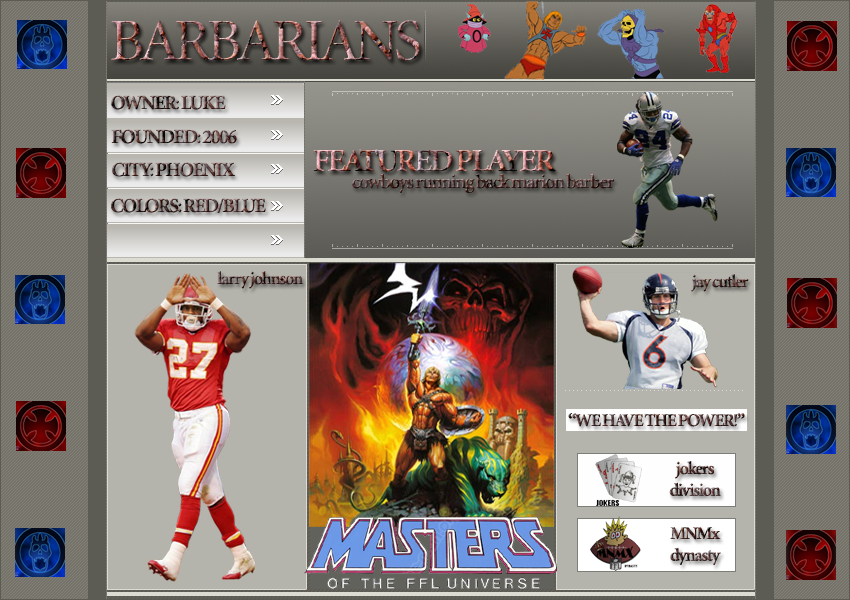
<style>
.page{position:relative;width:850px;height:600px}
.page>*{position:absolute;margin:0}
.t1{font:60px "Minion-Regular";letter-spacing:-0.075em}
.t2{font:20px "Minion-Bold";letter-spacing:-0.075em}
.t3{font:32px "Minion-Bold";letter-spacing:-0.075em}
.t4{font:18px "Minion-Bold";letter-spacing:-0.075em}
</style>
<div class="page">
<p class="t1" style="left:111px;top:20px;width:310px;height:41px">BARBARIANS</p>
<p class="t2" style="left:111px;top:95px;width:115px;height:15px">OWNER: LUKE</p>
<p class="t2" style="left:111px;top:129px;width:126px;height:15px">FOUNDED: 2006</p>
<p class="t3" style="left:313px;top:149px;width:243px;height:23px">FEATURED PLAYER</p>
<p class="t2" style="left:112px;top:162px;width:123px;height:15px">CITY: PHOENIX</p>
<p class="t2" style="left:352px;top:173px;width:263px;height:20px">cowboys running back marion barber</p>
<p class="t2" style="left:111px;top:198px;width:155px;height:15px">COLORS: RED/BLUE</p>
<p class="t4" style="left:217px;top:271px;width:86px;height:18px">larry johnson</p>
<p class="t4" style="left:691px;top:274px;width:58px;height:18px">jay cutler</p>
<p class="t4" style="left:568px;top:413px;width:177px;height:14px">“WE HAVE THE POWER!”</p>
<p class="t4" style="left:669px;top:461px;width:52px;height:35px;text-align:center">jokers<br>division</p>
<p class="t4" style="left:670px;top:527px;width:51px;height:38px;text-align:center">MNMx<br>dynasty</p>
</div>
